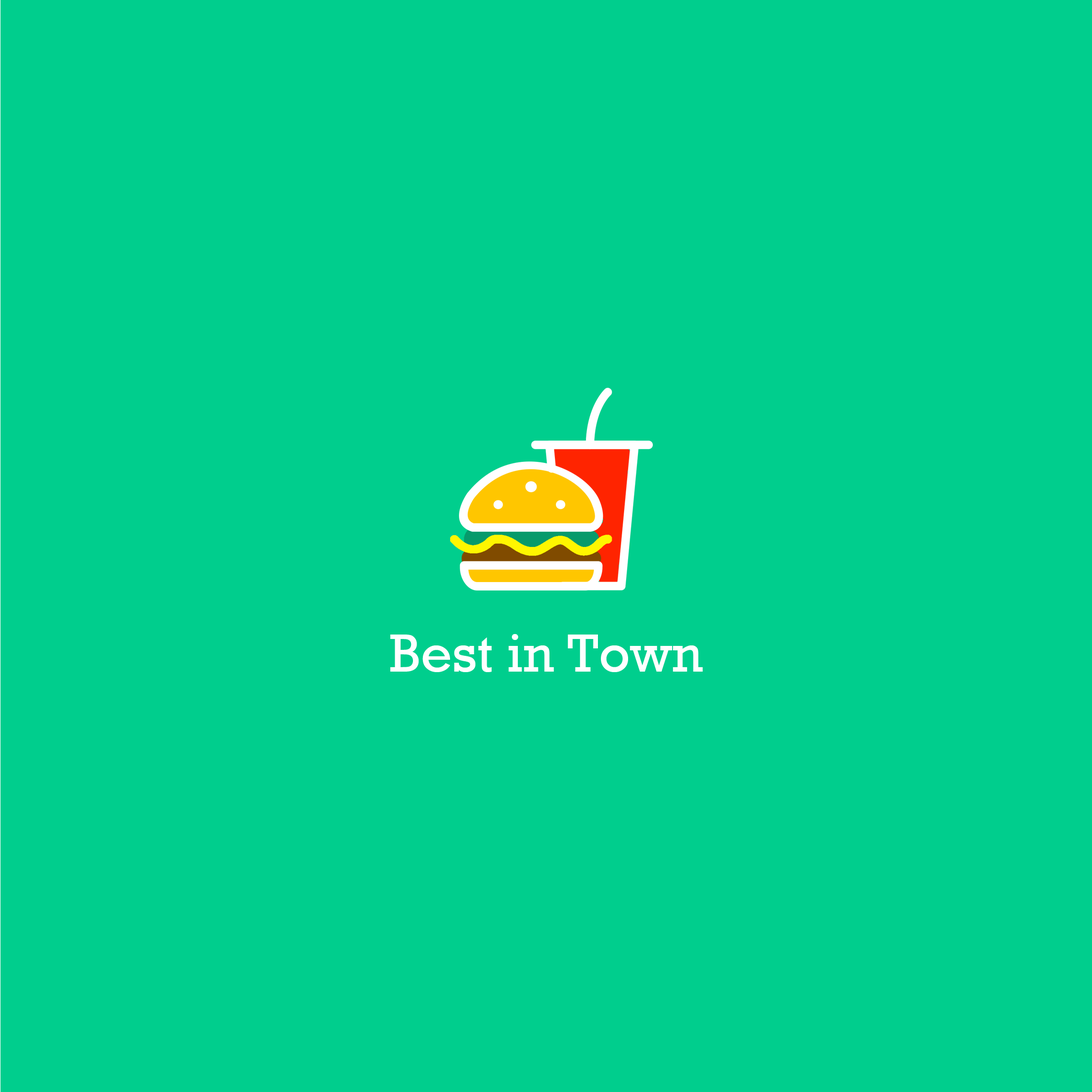
<style>
.page{position:relative;width:1092px;height:1092px;background:#00ce8d}
.page>*{position:absolute;margin:0}
.t1{font:54.4px "Rockwell";color:#ffffff}
</style>
<div class="page">
<p class="t1" style="left:390px;top:634px;width:313px;height:38px">Best in Town</p>
</div>
